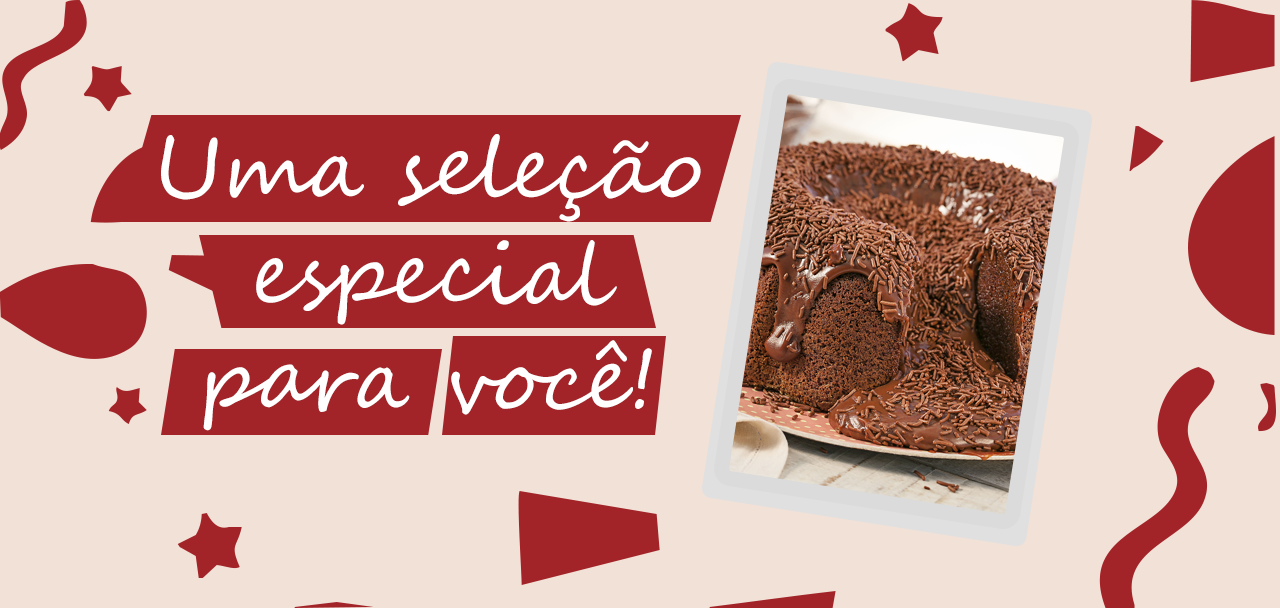
<style>
.page{position:relative;width:1280px;height:608px;background:#f1e1d7}
.page>*{position:absolute;margin:0}
.t1{font:84.5px "SegoeScript";letter-spacing:-0.01em;color:#ffffff;scale:1.04 1}
</style>
<div class="page">
<p class="t1" style="left:161px;top:134px;width:540px;height:297px;text-align:center">Uma seleção<br>especial<br>para você!</p>
</div>
